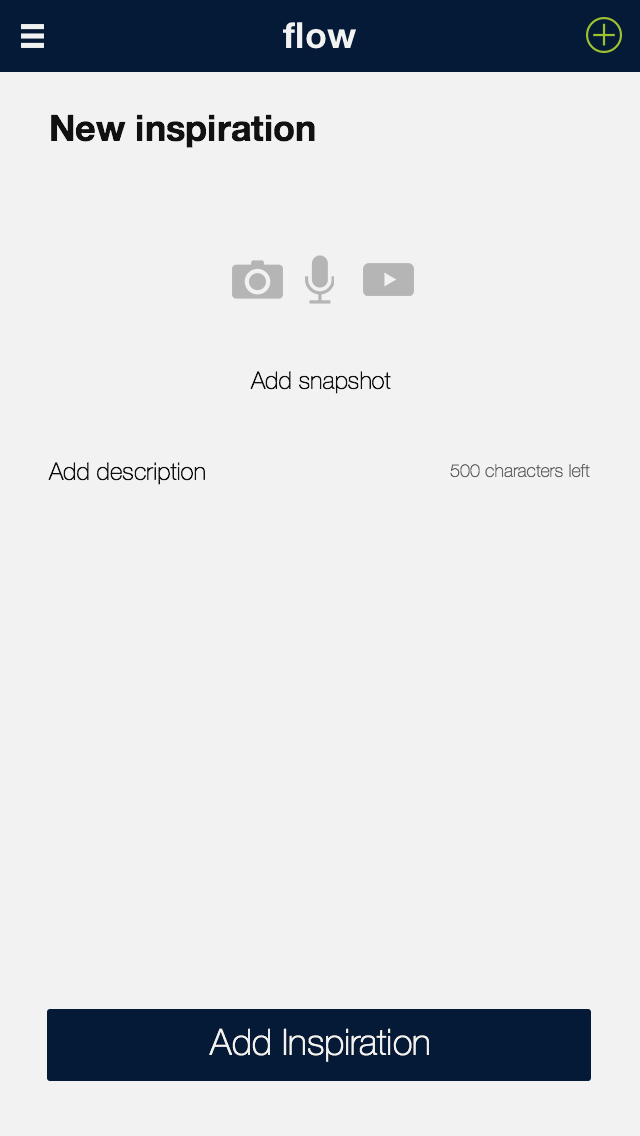
<style>
.page{position:relative;width:640px;height:1136px;background:#f2f2f2}
.page>*{position:absolute;margin:0}
.t1{font:36px "HelveticaNeue-Bold";color:#f2f2f2}
.t2{font:36px "HelveticaNeue-Bold";color:#111111}
.t3{font:24px "HelveticaNeue-Thin";color:#111111}
.t4{font:18px "HelveticaNeue-Thin";color:#666666}
.t5{font:36px "HelveticaNeue-Thin";color:#f2f2f2}
</style>
<div class="page">
<p class="t1" style="left:283px;top:22px;width:73px;height:27px">flow</p>
<p class="t2" style="left:51px;top:114px;width:264px;height:34px">New inspiration</p>
<p class="t3" style="left:250px;top:371px;width:141px;height:23px">Add snapshot</p>
<p class="t3" style="left:48px;top:462px;width:157px;height:23px">Add description</p>
<p class="t4" style="left:450px;top:463px;width:140px;height:15px">500 characters left</p>
<p class="t5" style="left:209px;top:1028px;width:220px;height:34px">Add Inspiration</p>
</div>
